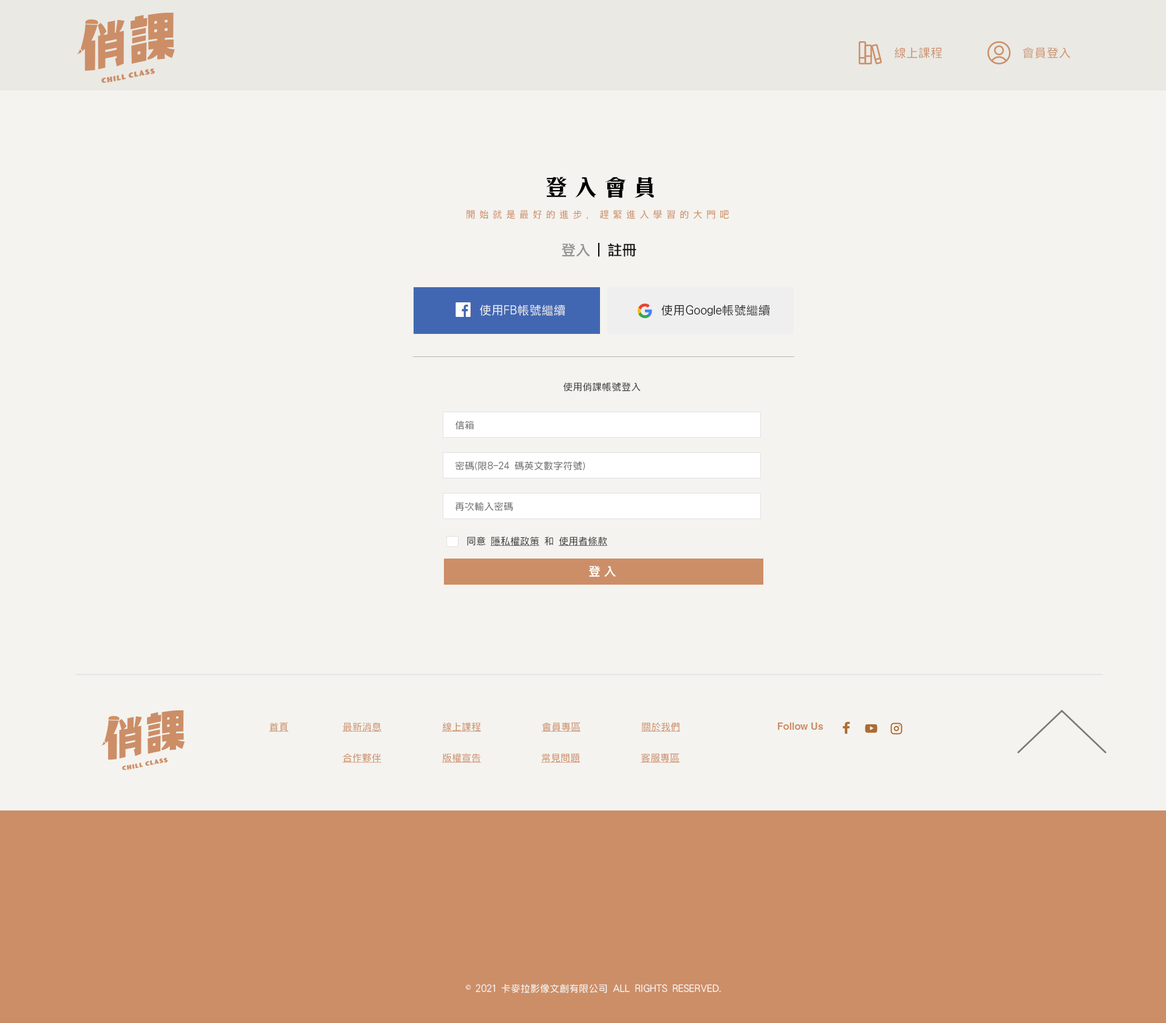
<style>
.page{position:relative;width:1166px;height:1023px;background:#f4f3ef}
.page>*{position:absolute;margin:0}
.t1{font:12.1px "HanWangHeiLight";color:#cc8e67}
.t2{font:23px "CHei3HK-Bold";letter-spacing:0.3em;color:#000000}
.t3{font:9.7px "HanWangHeiLight";letter-spacing:0.4em;color:#cc8e67}
.t4{font:14.6px "HanWangHeiBold";color:#959595}
.t5{font:14.6px "HanWangHeiBold";color:#000000}
.t6{font:14.6px "HanWangHeiBold";color:#1b1b1b}
.t7{font:12.1px "HanWangHeiLight";color:#efefef}
.t8{font:12.1px "HanWangHeiLight";color:#1b1b1b}
.t9{font:9.7px "HanWangHeiLight";color:#323232}
.t10{font:9.7px "HanWangHeiLight";color:#666666}
.t11{font:9.7px "HanWangHeiLight";color:#323232;text-decoration:underline}
.t12{font:12.1px "HanWangHeiBold";letter-spacing:0.3em;color:#fefefe}
.t13{font:9.7px "HanWangHeiLight";color:#cc8e67;text-decoration:underline}
.t14{font:9.7px "Helvetica-Bold";color:#cc8e67}
.t15{font:9.7px "HanWangHeiLight";color:#f7f6f5}
.t16{font:9.7px "DFKaiShu-SB-Estd-BF";color:#f7f6f5}
</style>
<div class="page">
<p class="t1" style="left:894px;top:47px;width:48px;height:11px">線上課程</p>
<p class="t1" style="left:1022px;top:47px;width:48px;height:11px">會員登入</p>
<p class="t2" style="left:546px;top:177px;width:108px;height:21px">登入會員</p>
<p class="t3" style="left:466px;top:209px;width:263px;height:11px">開始就是最好的進步，趕緊進入學習的大門吧</p>
<p class="t4" style="left:562px;top:243px;width:74px;height:14px">登入<span class="t5"> | </span><span class="t6">註冊</span></p>
<p class="t7" style="left:480px;top:305px;width:85px;height:11px">使用FB帳號繼續</p>
<p class="t8" style="left:661px;top:305px;width:109px;height:11px">使用Google帳號繼續</p>
<p class="t9" style="left:563px;top:382px;width:77px;height:10px">使用俏課帳號登入</p>
<p class="t10" style="left:455px;top:421px;width:19px;height:9px">信箱</p>
<p class="t10" style="left:455px;top:461px;width:130px;height:10px">密碼(限8-24 碼英文數字符號)</p>
<p class="t10" style="left:455px;top:502px;width:58px;height:9px">再次輸入密碼</p>
<p class="t11" style="left:467px;top:536px;width:140px;height:10px"><span class="t9">同意 </span>隱私權政策<span class="t9"> 和 </span>使用者條款</p>
<p class="t12" style="left:589px;top:565px;width:27px;height:12px">登入</p>
<p class="t13" style="left:269px;top:722px;width:19px;height:10px">首頁</p>
<p class="t13" style="left:342px;top:722px;width:39px;height:10px">最新消息</p>
<p class="t13" style="left:442px;top:722px;width:39px;height:10px">線上課程</p>
<p class="t13" style="left:542px;top:722px;width:38px;height:10px">會員專區</p>
<p class="t13" style="left:641px;top:722px;width:39px;height:10px">關於我們</p>
<p class="t14" style="left:778px;top:722px;width:45px;height:8px">Follow Us</p>
<p class="t13" style="left:342px;top:753px;width:39px;height:10px">合作夥伴</p>
<p class="t13" style="left:442px;top:753px;width:39px;height:10px">版權宣告</p>
<p class="t13" style="left:541px;top:753px;width:39px;height:10px">常見問題</p>
<p class="t13" style="left:640px;top:753px;width:39px;height:10px">客服專區</p>
<p class="t15" style="left:465px;top:984px;width:256px;height:9px"><span class="t16">©</span> 2021 卡麥拉影像文創有限公司 ALL RIGHTS RESERVED.</p>
</div>
